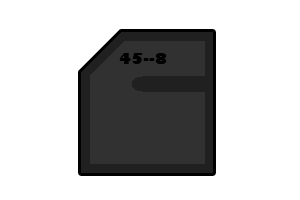
<style>
.page{position:relative;width:300px;height:200px;background:#ffffff}
.page>*{position:absolute;margin:0}
.t1{font:14px "GillSans-UltraBold";color:#010101}
</style>
<div class="page">
<p class="t1" style="left:119px;top:53px;width:48px;height:11px">45--8</p>
</div>
